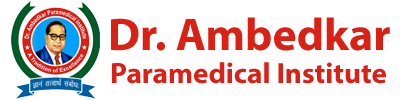
<style>
.page{position:relative;width:400px;height:100px;background:#ffffff}
.page>*{position:absolute;margin:0}
.t1{font:45.8px "MyriadPro-Bold";color:#db2015}
.t2{font:29.2px "MyriadPro-Bold";color:#db2015}
</style>
<div class="page">
<p class="t1" style="left:111px;top:17px;width:279px;height:34px">Dr. Ambedkar</p>
<p class="t2" style="left:112px;top:62px;width:274px;height:22px">Paramedical Institute</p>
</div>
